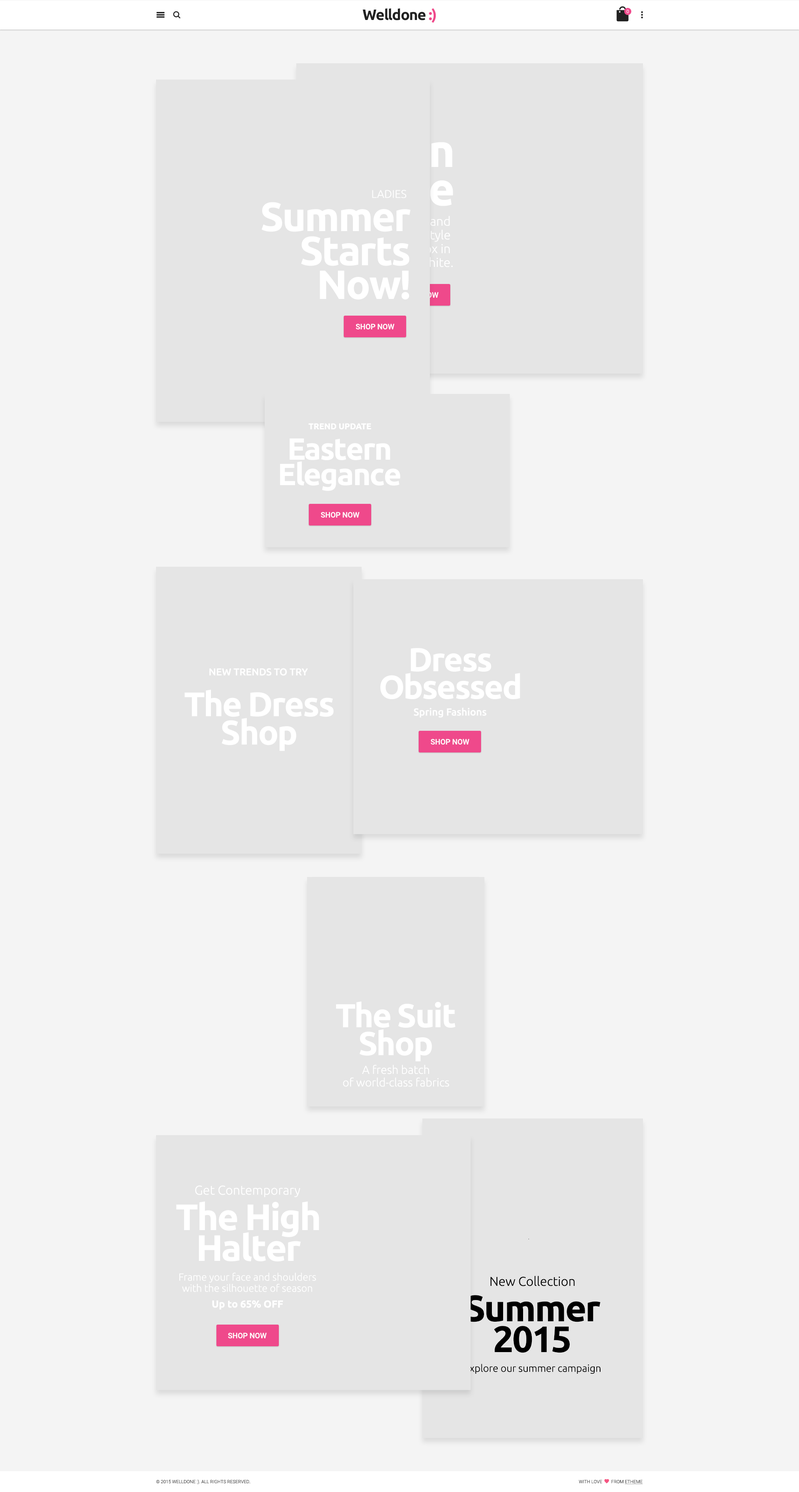
<style>
.page{position:relative;width:799px;height:1492px;background:#f4f4f4}
.page>*{position:absolute;margin:0}
.t1{font:15px "Ubuntu-Bold";letter-spacing:-0.04em;color:#212121}
.t2{font:15px "Ubuntu-Bold";letter-spacing:-0.04em;color:#ef498b}
.t3{font:4.6px "Roboto-Light";color:#ffffff}
.t4{font:46px/38.4px "Ubuntu-Bold";letter-spacing:-0.04em;color:#e5e5e5}
.t5{font:11.1px "Ubuntu-Light";color:#ffffff}
.t6{font:40.8px/34px "Ubuntu-Bold";letter-spacing:-0.04em;color:#ffffff}
.t7{font:7.5px "Roboto-Medium";text-transform:uppercase}
.t8{font:7.5px "Roboto-Medium";color:#ffffff;text-transform:uppercase}
.t9{font:8.3px "Ubuntu-Bold";color:#ffffff}
.t10{font:30.6px/25.5px "Ubuntu-Bold";letter-spacing:-0.04em;color:#ffffff}
.t11{font:33.1px/27.6px "Ubuntu-Bold";letter-spacing:-0.04em;color:#ffffff}
.t12{font:10px "Ubuntu-Medium";color:#ffffff}
.t13{font:34.1px/28.4px "Ubuntu-Bold";letter-spacing:-0.04em;color:#ffffff}
.t14{font:10.1px "Ubuntu-Medium";color:#ffffff}
.t15{font:33.2px/27.6px "Ubuntu-Bold";letter-spacing:-0.04em;color:#ffffff}
.t16{font:11.5px/12.6px "Ubuntu-Light";color:#ffffff}
.t17{font:12.8px "Ubuntu-Light";color:#ffffff}
.t18{font:36.9px/30.7px "Ubuntu-Bold";letter-spacing:-0.04em;color:#ffffff}
.t19{font:10.1px/11.1px "Ubuntu-Light";color:#ffffff}
.t20{font:10.1px/15.8px "Ubuntu-Bold";color:#ffffff}
.t21{font:12.8px "Ubuntu-Light";color:#000000}
.t22{font:36.9px/30.7px "Ubuntu-Bold";letter-spacing:-0.04em;color:#000000}
.t23{font:10.1px "Ubuntu-Light";color:#000000}
.t24{font:4.6px "Roboto-Light";color:#2b2b2b;text-transform:uppercase}
</style>
<div class="page">
<p class="t1" style="left:363px;top:8px;width:73px;height:15px">Welldone <span class="t2">:)</span></p>
<p class="t3" style="left:627px;top:10px;width:2px;height:3px">0</p>
<p class="t4" style="left:341px;top:131px;width:112px;height:75px;text-align:right">Clean<br>slate</p>
<p class="t5" style="left:372px;top:190px;width:35px;height:8px">LADIES</p>
<p class="t6" style="left:261px;top:202px;width:150px;height:98px;text-align:right">Summer<br>Starts<br>Now!</p>
<p class="t7" style="left:400px;top:292px;width:39px;height:6px">SHOP NOW</p>
<p class="t8" style="left:356px;top:323px;width:39px;height:6px">SHOP NOW</p>
<p class="t9" style="left:309px;top:423px;width:62px;height:7px">TREND UPDATE</p>
<p class="t10" style="left:280px;top:438px;width:121px;height:53px;text-align:center">Eastern<br>Elegance</p>
<p class="t8" style="left:321px;top:512px;width:39px;height:6px">SHOP NOW</p>
<p class="t11" style="left:381px;top:648px;width:139px;height:51px;text-align:center">Dress<br>Obsessed</p>
<p class="t12" style="left:209px;top:668px;width:99px;height:8px">NEW TRENDS TO TRY</p>
<p class="t13" style="left:184px;top:689px;width:150px;height:62px;text-align:center">The Dress<br>Shop</p>
<p class="t14" style="left:414px;top:707px;width:73px;height:10px">Spring Fashions</p>
<p class="t8" style="left:431px;top:739px;width:39px;height:5px">SHOP NOW</p>
<p class="t15" style="left:336px;top:1001px;width:120px;height:60px;text-align:center">The Suit<br>Shop</p>
<p class="t16" style="left:343px;top:1065px;width:107px;height:22px;text-align:center">A fresh batch<br>of world-class fabrics</p>
<p class="t17" style="left:195px;top:1185px;width:106px;height:12px">Get Contemporary</p>
<p class="t18" style="left:176px;top:1201px;width:143px;height:60px;text-align:center">The High<br>Halter</p>
<p class="t19" style="left:179px;top:1272px;width:137px;height:37px;text-align:center">Frame your face and shoulders<br>with the silhouette of season<br><span class="t20">Up to 65% OFF</span></p>
<p class="t21" style="left:490px;top:1276px;width:85px;height:10px">New Collection</p>
<p class="t22" style="left:465px;top:1295px;width:136px;height:58px;text-align:center">Summer<br>2015</p>
<p class="t8" style="left:228px;top:1332px;width:39px;height:6px">SHOP NOW</p>
<p class="t23" style="left:465px;top:1363px;width:136px;height:10px">Explore our summer campaign</p>
<p class="t24" style="left:156px;top:1479px;width:94px;height:5px">© 2015 Welldone :). All Rights Reserved.</p>
</div>
